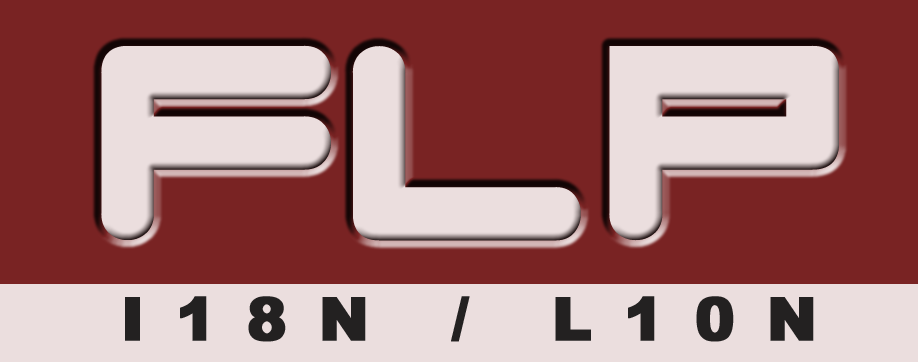
<style>
.page{position:relative;width:918px;height:362px;background:#792323}
.page>*{position:absolute;margin:0}
.t1{font:327.2px "RadioStars";color:#ebdede;font-weight:bold}
.t2{font:60px "Arial-Black";letter-spacing:0.5em;color:#232121;text-transform:uppercase;font-weight:bold}
</style>
<div class="page">
<p class="t1" style="left:101px;top:45px;width:738px;height:196px">FLP</p>
<p class="t2" style="left:125px;top:296px;width:689px;height:46px">i18n / l10n</p>
</div>
